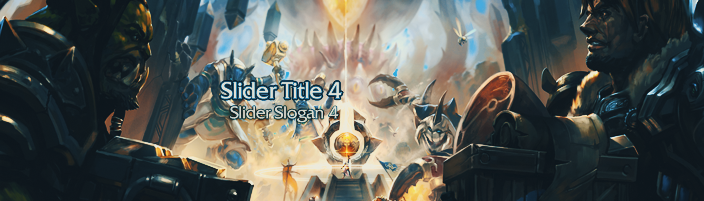
<style>
.page{position:relative;width:704px;height:201px}
.page>*{position:absolute;margin:0}
.t1{font:22.8px "BlizQuadrataWeb";color:#e2e2e2}
.t2{font:16.8px "BlizQuadrataWeb";color:#e2e2e2}
</style>
<div class="page">
<p class="t1" style="left:221px;top:82px;width:121px;height:17px">Slider Title 4</p>
<p class="t2" style="left:230px;top:106px;width:109px;height:17px;opacity:0.8">Slider Slogan 4</p>
</div>
